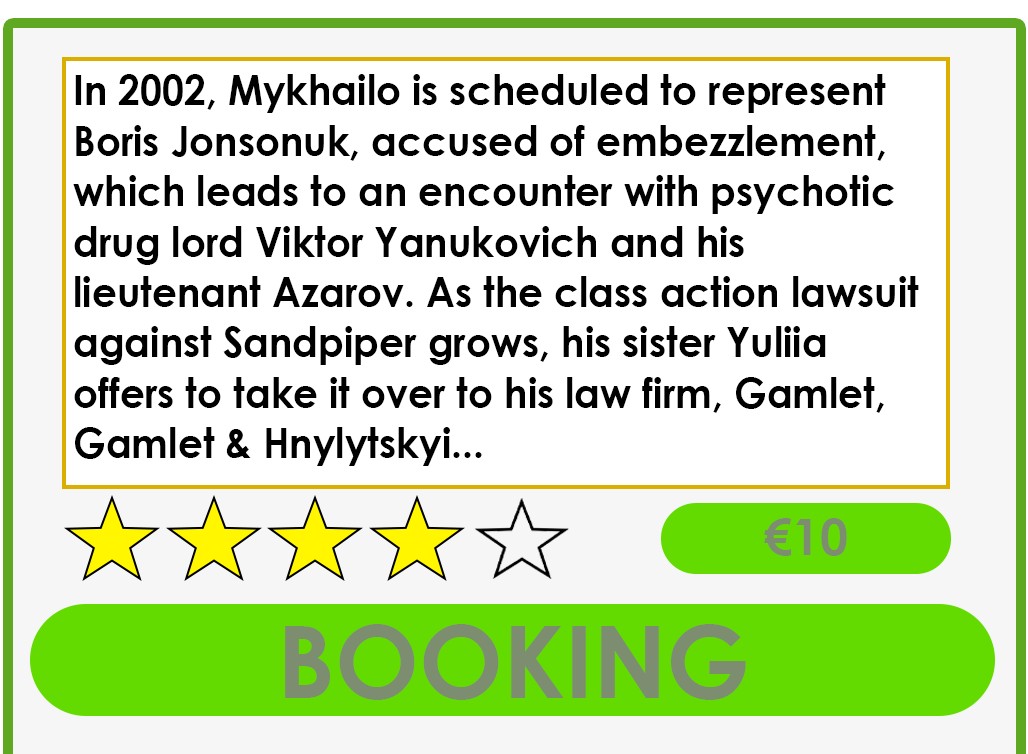
<style>
.page{position:relative;width:1028px;height:754px;background:#ffffff}
.page>*{position:absolute;margin:0}
.t1{font:42px "CenturyGothic-Bold";color:#000000;scale:0.93 1}
.t2{font:50px "CenturyGothic-Bold";color:#7d8d6f}
.t3{font:100px "CenturyGothic-Bold";color:#7d8d6f}
</style>
<div class="page">
<p class="t1" style="left:73px;top:74px;width:846px;height:392px">In 2002, Mykhailo is scheduled to represent Boris Jonsonuk, accused of embezzlement, which leads to an encounter with psychotic drug lord Viktor Yanukovich and his lieutenant Azarov. As the class action lawsuit against Sandpiper grows, his sister Yuliia offers to take it over to his law firm, Gamlet, Gamlet &amp; Hnylytskyi...</p>
<p class="t2" style="left:764px;top:518px;width:83px;height:38px">€10</p>
<p class="t3" style="left:285px;top:624px;width:461px;height:76px">BOOKING</p>
</div>
